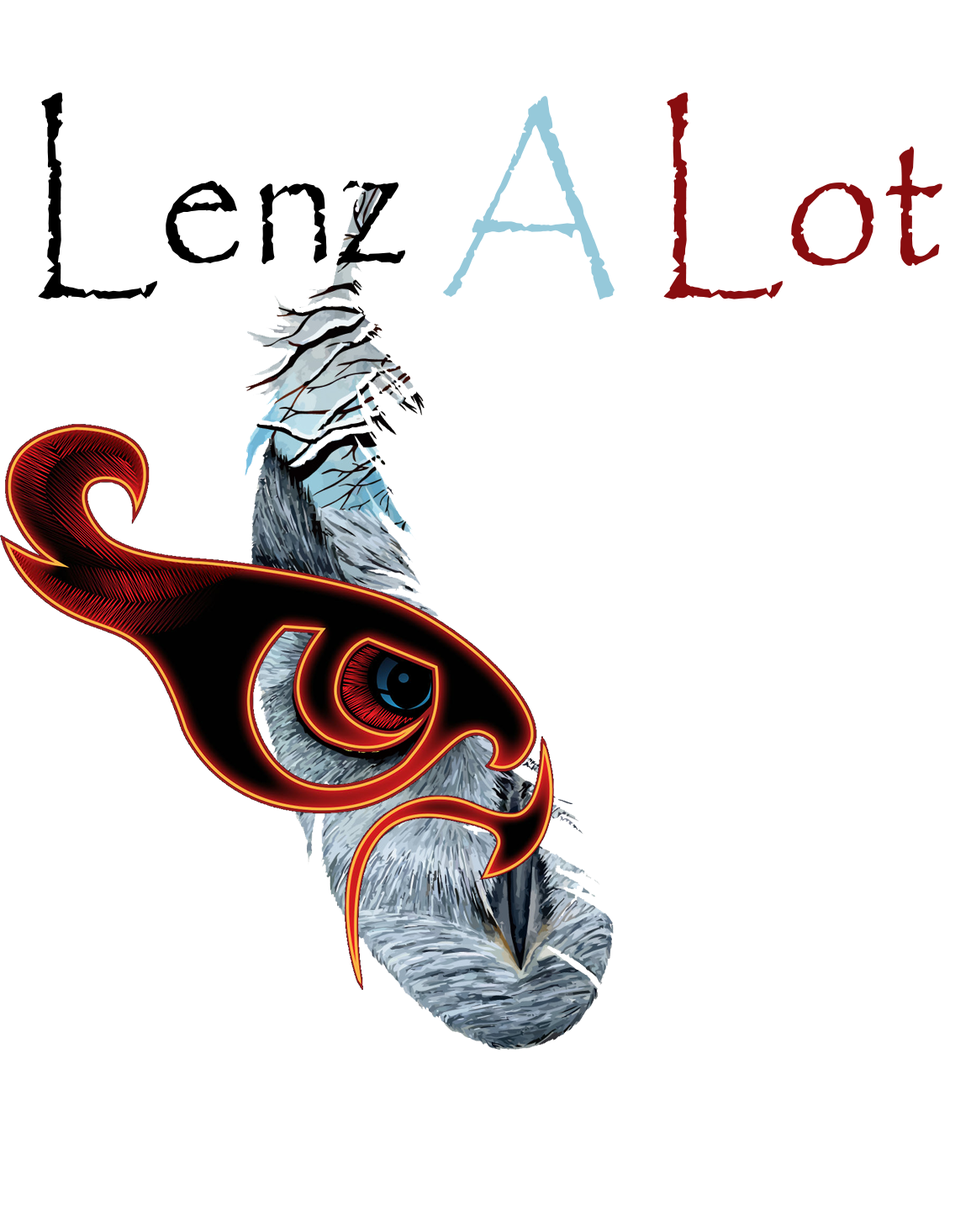
<style>
.page{position:relative;width:971px;height:1228px;background:#ffffff}
.page>*{position:absolute;margin:0}
.t1{font:214.8px "Papyrus-Regular";color:#000000;scale:0.82 1}
.t2{font:214.8px "Papyrus-Regular";color:#96c9da;scale:0.82 1}
.t3{font:214.8px "Papyrus-Regular";color:#880d0f;scale:0.82 1}
</style>
<div class="page">
<p class="t1" style="left:38px;top:93px;width:905px;height:207px">Lenz <span class="t2">A</span><span class="t3"> Lot</span></p>
</div>
